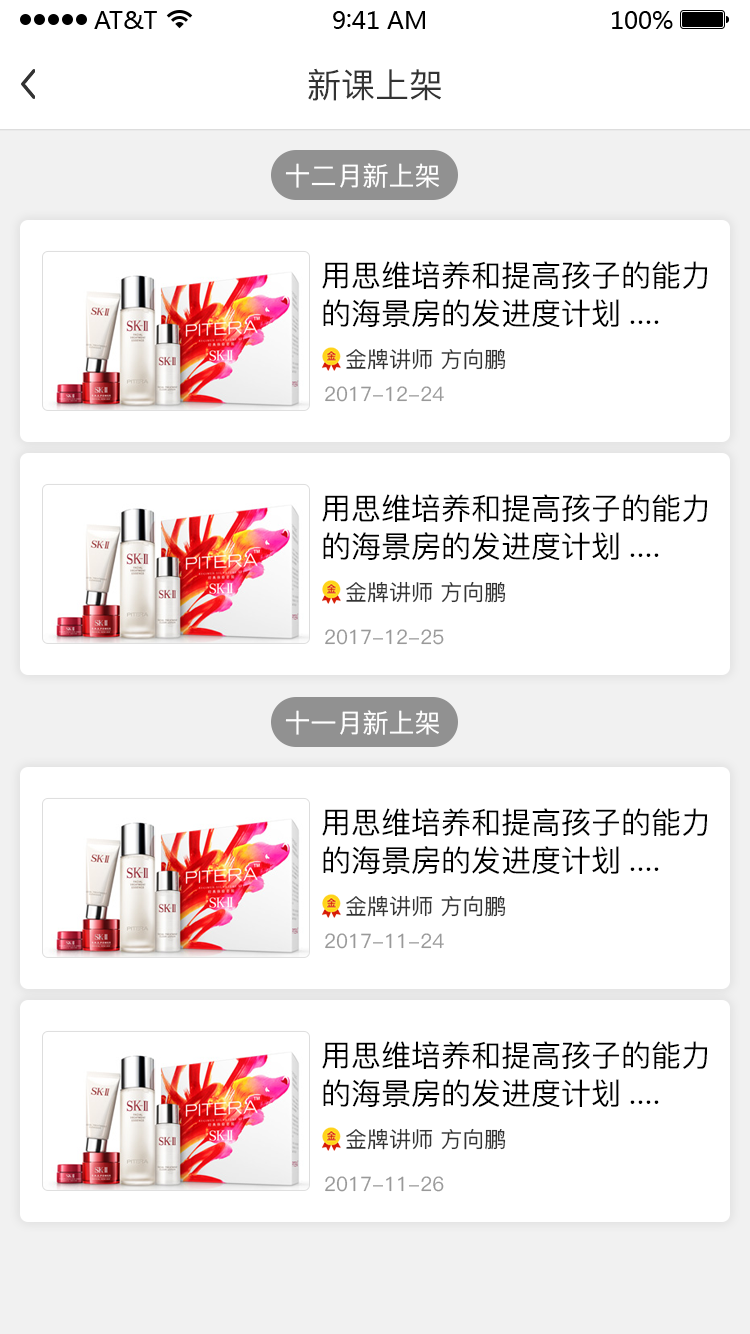
<style>
.page{position:relative;width:750px;height:1334px;background:#ffffff}
.page>*{position:absolute;margin:0}
.t1{font:34px "PingFang-SC-Medium";color:#333333}
.t2{font:26px "PingFang-SC-Medium";color:#ffffff}
.t3{font:30px/38px "PingFang-SC-Medium";color:#000000}
.t4{font:22px "PingFang-SC-Medium";color:#333333}
.t5{font:20px "PingFang-SC-Medium";color:#999999}
</style>
<div class="page">
<p class="t1" style="left:308px;top:68px;width:133px;height:33px">新课上架</p>
<p class="t2" style="left:285px;top:163px;width:154px;height:25px">十二月新上架</p>
<p class="t3" style="left:322px;top:261px;width:386px;height:66px">用思维培养和提高孩子的能力<br>的海景房的发进度计划....</p>
<p class="t4" style="left:346px;top:348px;width:160px;height:22px">金牌讲师 方向鹏</p>
<p class="t5" style="left:325px;top:386px;width:119px;height:16px">2017-12-24</p>
<p class="t3" style="left:322px;top:494px;width:386px;height:66px">用思维培养和提高孩子的能力<br>的海景房的发进度计划....</p>
<p class="t4" style="left:346px;top:581px;width:160px;height:22px">金牌讲师 方向鹏</p>
<p class="t5" style="left:325px;top:629px;width:119px;height:16px">2017-12-25</p>
<p class="t2" style="left:285px;top:710px;width:154px;height:25px">十一月新上架</p>
<p class="t3" style="left:322px;top:808px;width:386px;height:66px">用思维培养和提高孩子的能力<br>的海景房的发进度计划....</p>
<p class="t4" style="left:346px;top:895px;width:160px;height:22px">金牌讲师 方向鹏</p>
<p class="t5" style="left:325px;top:933px;width:119px;height:16px">2017-11-24</p>
<p class="t3" style="left:322px;top:1041px;width:386px;height:66px">用思维培养和提高孩子的能力<br>的海景房的发进度计划....</p>
<p class="t4" style="left:346px;top:1128px;width:160px;height:22px">金牌讲师 方向鹏</p>
<p class="t5" style="left:325px;top:1176px;width:119px;height:16px">2017-11-26</p>
</div>
